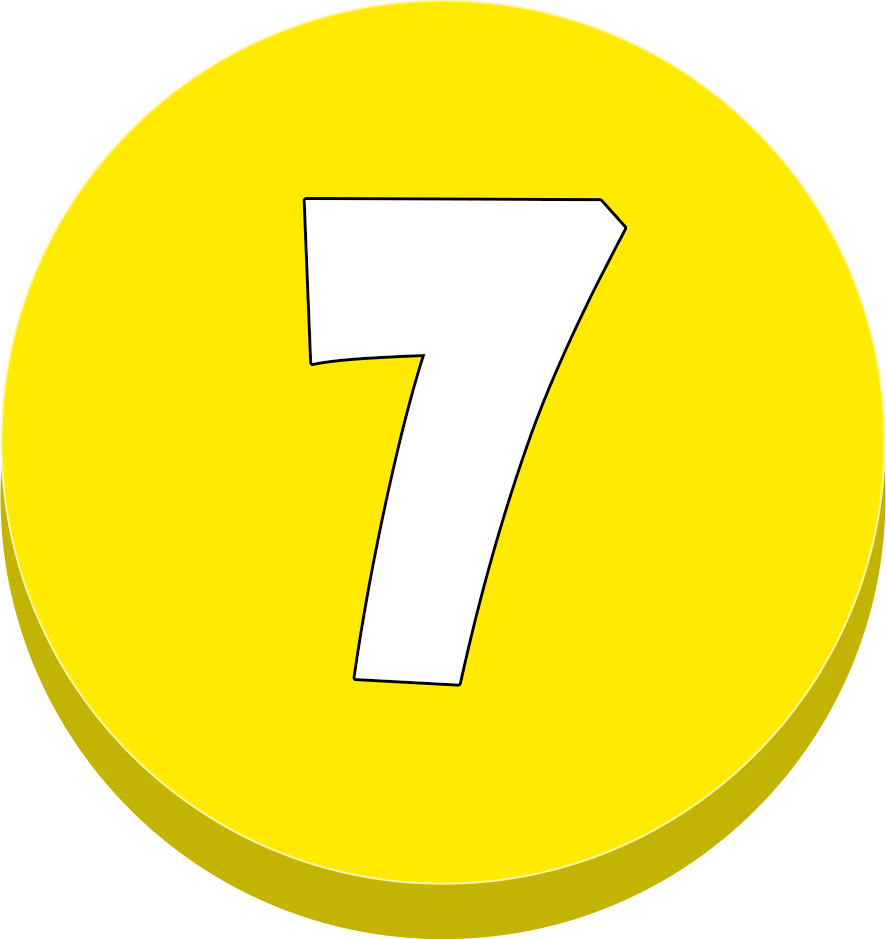
<style>
.page{position:relative;width:886px;height:939px;background:#ffea00}
.page>*{position:absolute;margin:0}
.t1{font:637.2px "ShowcardGothic-Reg";color:#ffffff}
</style>
<div class="page">
<p class="t1" style="left:305px;top:200px;width:320px;height:484px">7</p>
</div>
